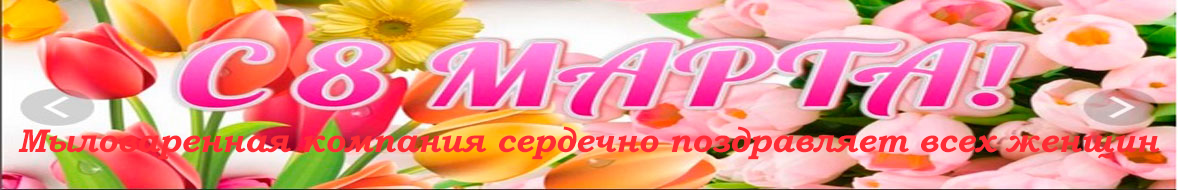
<style>
.page{position:relative;width:1178px;height:190px}
.page>*{position:absolute;margin:0}
.t1{font:33px "BookmanOldStyle-BoldItalic";color:#fe2c35}
</style>
<div class="page">
<p class="t1" style="left:18px;top:126px;width:1142px;height:34px">Мыловаренная компания сердечно поздравляет всех женщин</p>
</div>
